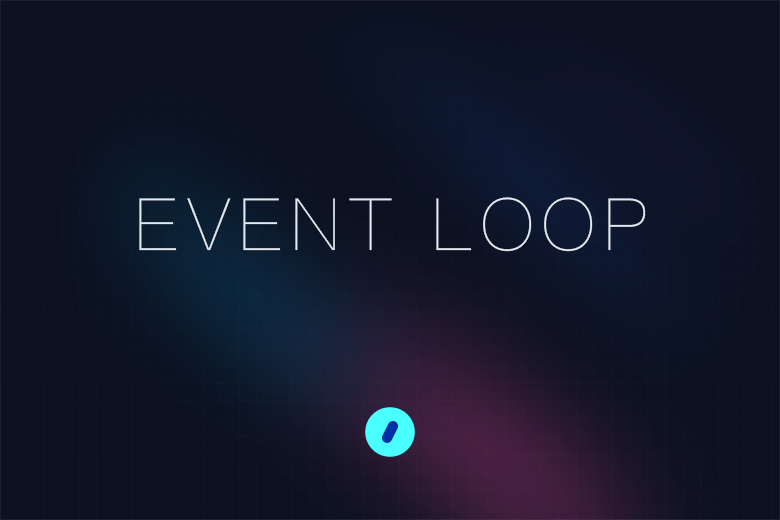
<style>
.page{position:relative;width:780px;height:520px;background:#0b1121}
.page>*{position:absolute;margin:0}
.t1{font:72px "PingFangSC-ExtraLight";letter-spacing:0.1em;color:#e2e8f0}
</style>
<div class="page">
<p class="t1" style="left:139px;top:197px;width:507px;height:55px">EVENT LOOP</p>
</div>
